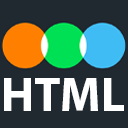
<style>
.page{position:relative;width:128px;height:128px;background:#202830}
.page>*{position:absolute;margin:0}
.t1{font:48px "MyriadPro-Bold";color:#ffffff}
</style>
<div class="page">
<p class="t1" style="left:4px;top:78px;width:120px;height:33px">HTML</p>
</div>
